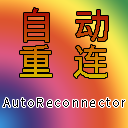
<style>
.page{position:relative;width:128px;height:128px}
.page>*{position:absolute;margin:0}
.t1{font:36px/36px "NotoSansCJKsc-Medium";letter-spacing:0.16em;color:#000000}
.t2{font:12px "NotoSansCJKsc-Medium";letter-spacing:0.16em;color:#000000}
</style>
<div class="page">
<p class="t1" style="left:20px;top:8px;width:88px;height:70px">自 动<br>重 连</p>
<p class="t2" style="left:3px;top:98px;width:122px;height:9px">AutoReconnector</p>
</div>
